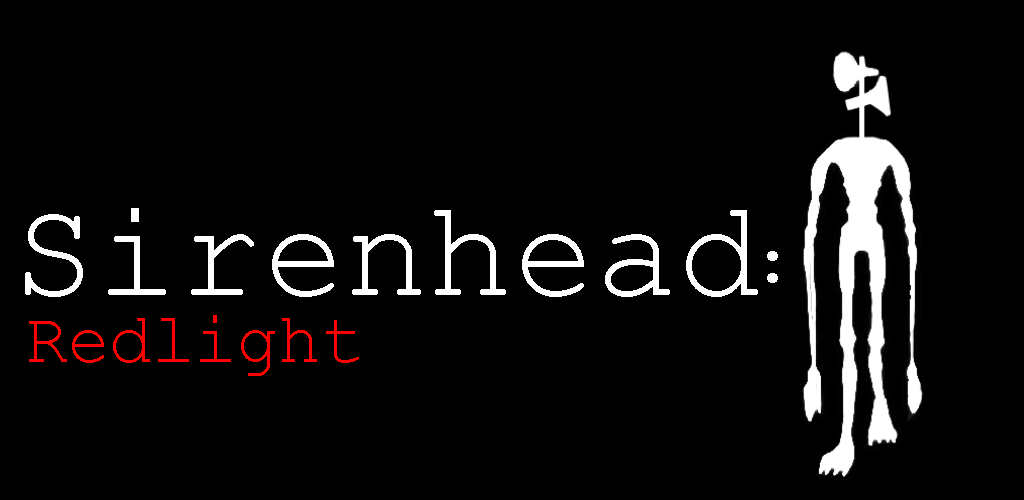
<style>
.page{position:relative;width:1024px;height:500px;background:#000000}
.page>*{position:absolute;margin:0}
.t1{font:138.5px "CourierNewPSMT";color:#ffffff}
.t2{font:71.7px "CourierNewPSMT";color:#ffffff}
.t3{font:71.7px "CourierNewPSMT";color:#ff0000}
</style>
<div class="page">
<p class="t1" style="left:25px;top:208px;width:733px;height:89px">Sirenhead</p>
<p class="t2" style="left:767px;top:251px;width:11px;height:32px">:</p>
<p class="t3" style="left:29px;top:315px;width:330px;height:61px">Redlight</p>
</div>
